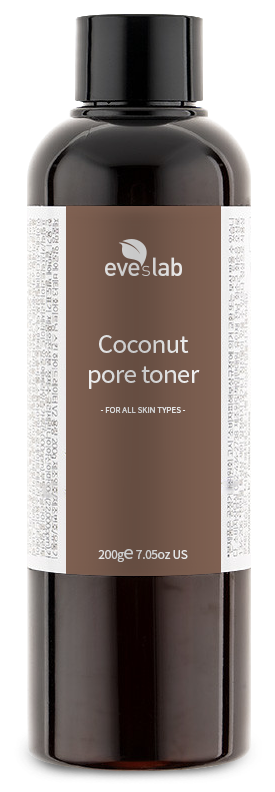
<style>
.page{position:relative;width:275px;height:792px;background:#ffffff}
.page>*{position:absolute;margin:0}
.t1{font:24px/30px "NotoSansKR-Regular";letter-spacing:-0.025em;color:#dadada}
.t2{font:8px "NotoSansKR-Regular";color:#d5d5d5}
.t3{font:12px "NotoSansKR-Regular";letter-spacing:-0.025em;color:#d4d4d4}
.t4{font:18px "NotoSansKR-Regular";letter-spacing:-0.025em;color:#d4d4d4}
</style>
<div class="page">
<p class="t1" style="left:89px;top:335px;width:111px;height:54px;text-align:center">Coconut<br>pore toner</p>
<p class="t2" style="left:100px;top:407px;width:86px;height:6px">- FOR ALL SKIN TYPES -</p>
<p class="t3" style="left:98px;top:549px;width:90px;height:13px">200g<span class="t4">e</span> 7.05oz US</p>
</div>
